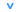
<style>
.page{position:relative;width:20px;height:12px;background:#ffffff}
.page>*{position:absolute;margin:0}
.t1{font:14px "Calibri-Bold";color:#3399ff}
</style>
<div class="page">
<p class="t1" style="left:6px;top:3px;width:8px;height:6px;rotate:90deg">&gt;</p>
</div>
